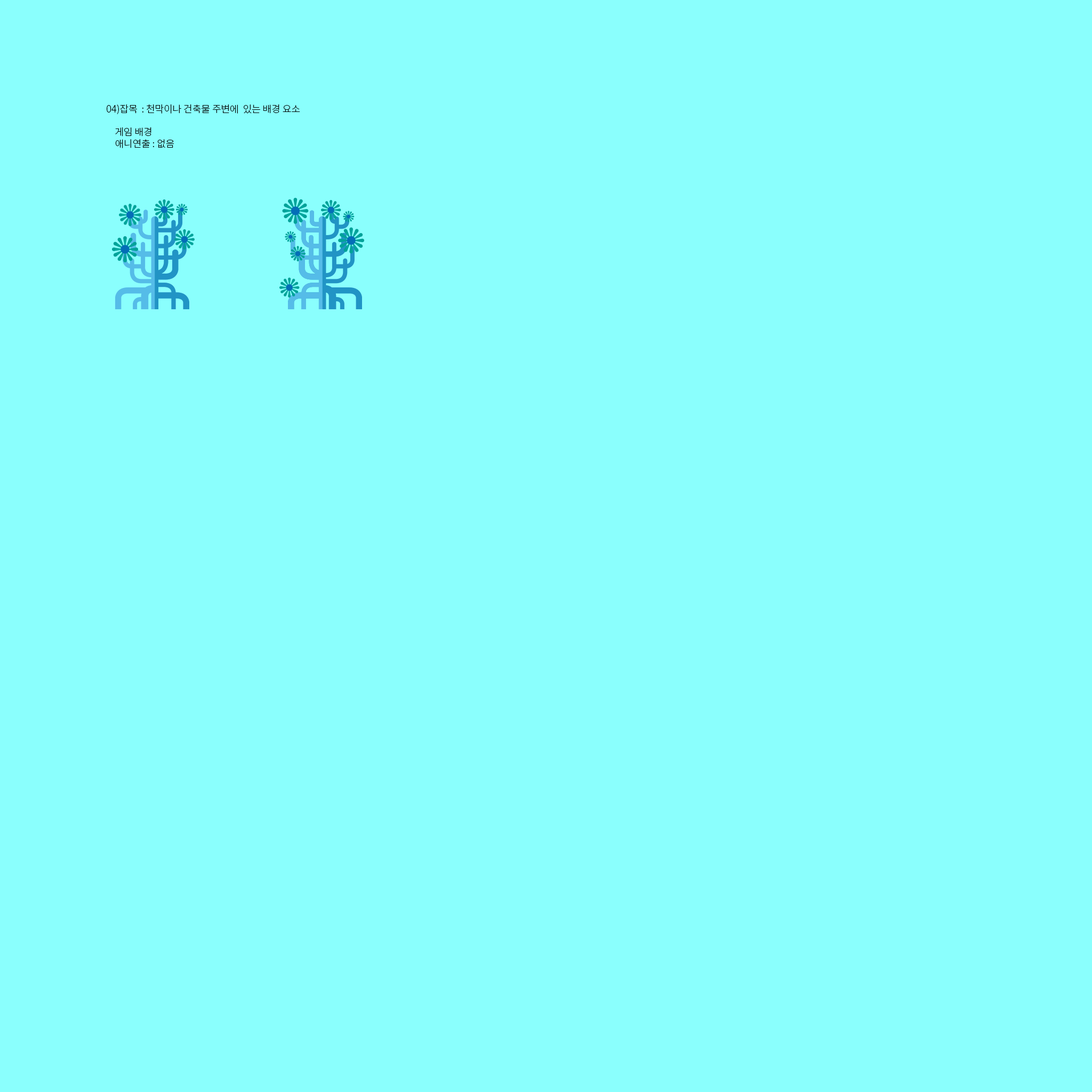
<style>
.page{position:relative;width:1092px;height:1092px;background:#8afffd}
.page>*{position:absolute;margin:0}
.t1{font:9.6px "NotoSansCJKkr-Light";color:#000000}
</style>
<div class="page">
<p class="t1" style="left:107px;top:104px;width:193px;height:44px">04)잡목  : 천막이나 건축물 주변에  있는 배경 요소 <br>    <br>    게임 배경<br>    애니연출 : 없음</p>
</div>
